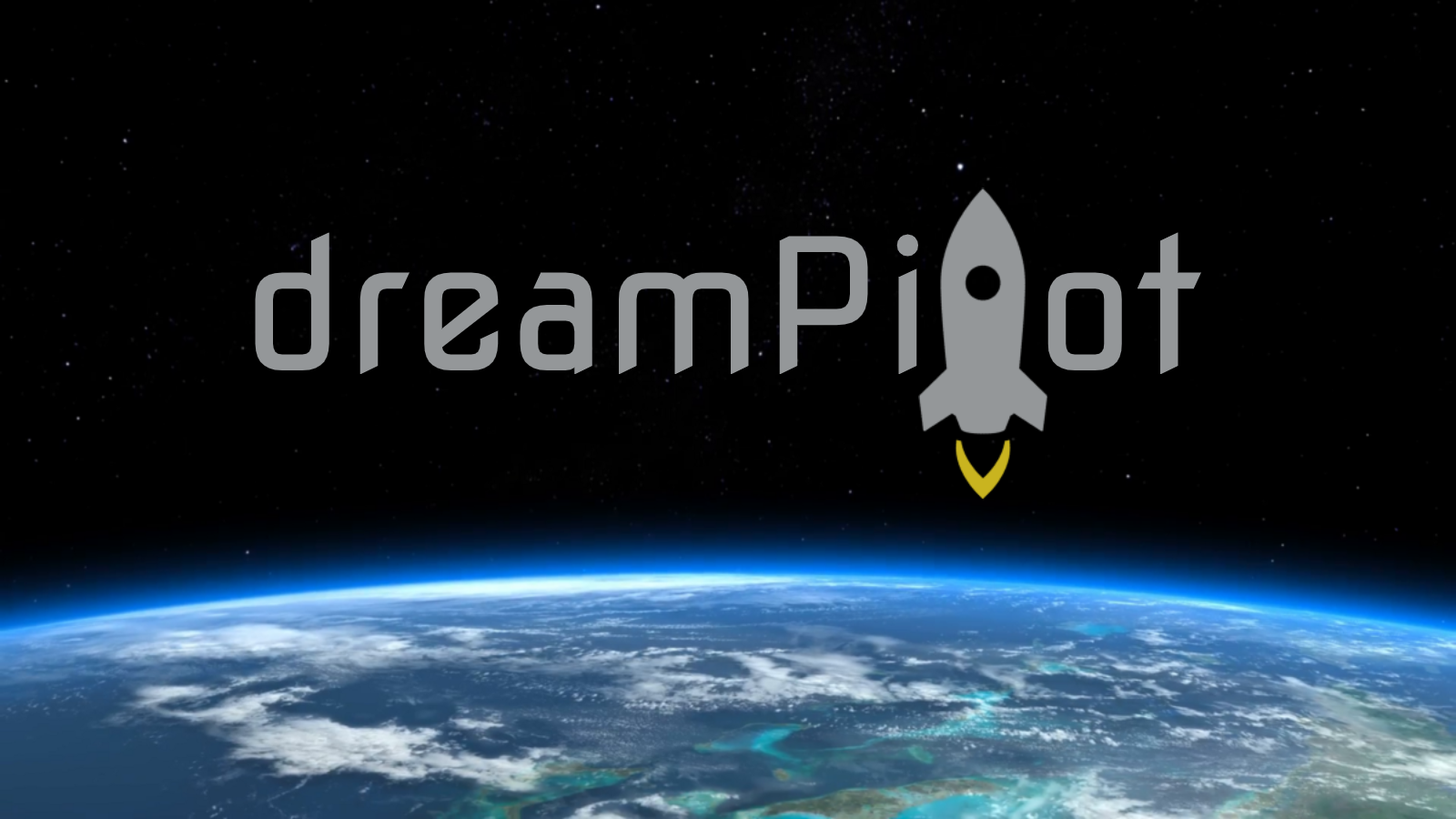
<style>
.page{position:relative;width:1456px;height:819px;background:#000000}
.page>*{position:absolute;margin:0}
.t1{font:182px "NovaSquare";color:#949799}
</style>
<div class="page">
<p class="t1" style="left:255px;top:232px;width:946px;height:142px">dreamPi  ot</p>
</div>
